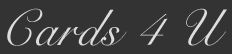
<style>
.page{position:relative;width:232px;height:54px;background:#333333}
.page>*{position:absolute;margin:0}
.t1{font:51px "SnellRoundhand";letter-spacing:0.03em;color:#dedddd}
</style>
<div class="page">
<p class="t1" style="left:7px;top:8px;width:220px;height:38px">Cards 4 U</p>
</div>
